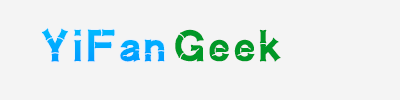
<style>
.page{position:relative;width:400px;height:100px;background:#f4f4f4}
.page>*{position:absolute;margin:0}
.t1{font:45px "HYq1gj";letter-spacing:0.04em;color:#00abff}
.t2{font:45px "HYq1gj";letter-spacing:0.04em;color:#009827}
</style>
<div class="page">
<p class="t1" style="left:42px;top:28px;width:123px;height:34px">YiFan</p>
<p class="t2" style="left:175px;top:29px;width:106px;height:33px">Geek</p>
</div>
